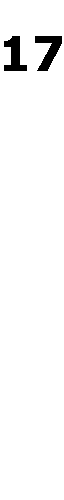
<style>
.page{position:relative;width:64px;height:500px;background:#ffffff}
.page>*{position:absolute;margin:0}
.t1{font:48px "Verdana-Bold";color:#000000}
</style>
<div class="page">
<p class="t1" style="left:4px;top:36px;width:58px;height:35px">17</p>
</div>
